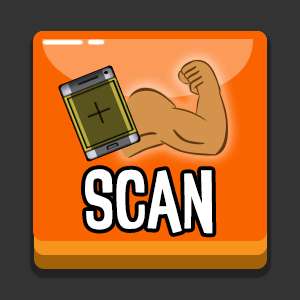
<style>
.page{position:relative;width:300px;height:300px;background:#333333}
.page>*{position:absolute;margin:0}
.t1{font:85.1px "InsideOut";color:#ffffff;scale:0.82 1}
</style>
<div class="page">
<p class="t1" style="left:85px;top:169px;width:128px;height:65px">scan</p>
</div>
